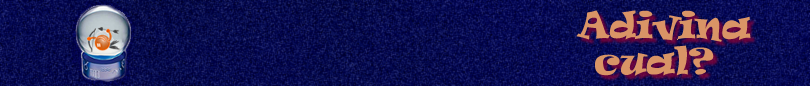
<style>
.page{position:relative;width:810px;height:86px}
.page>*{position:absolute;margin:0}
.t1{font:34.8px/34.8px "Ravie";color:#d99466}
</style>
<div class="page">
<p class="t1" style="left:576px;top:10px;width:175px;height:66px">Adivina<br> cual?</p>
</div>
